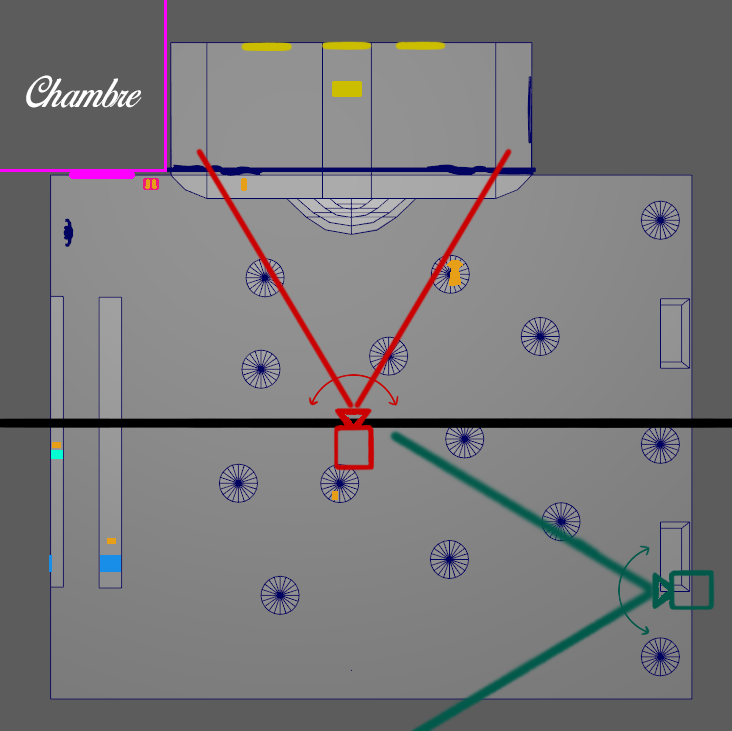
<style>
.page{position:relative;width:732px;height:731px;background:#5c5c5c}
.page>*{position:absolute;margin:0}
.t1{font:37.5px "BirdsofParadise-PersonaluseOnly";color:#ffffff}
</style>
<div class="page">
<p class="t1" style="left:26px;top:75px;width:116px;height:33px">Chambre</p>
</div>
